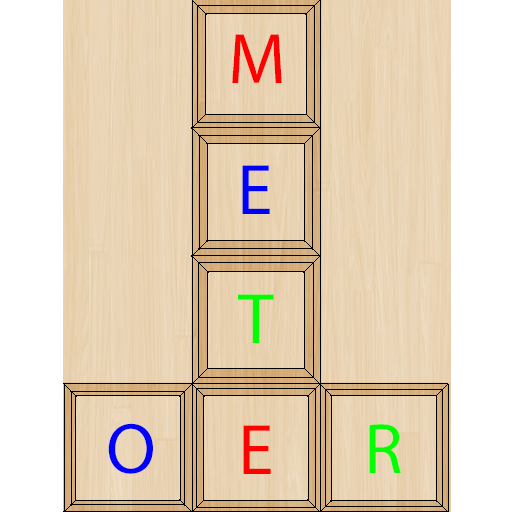
<style>
.page{position:relative;width:512px;height:512px;background:#ffffff}
.page>*{position:absolute;margin:0}
.t1{font:72px "MyriadPro-Regular";color:#ff0000}
.t2{font:72px "MyriadPro-Regular";color:#0000ff}
.t3{font:72px "MyriadPro-Regular";color:#00ff00}
.t4{font:72px "MyriadPro-Regular";color:#ff0101}
</style>
<div class="page">
<p class="t1" style="left:232px;top:34px;width:50px;height:49px">M</p>
<p class="t2" style="left:242px;top:165px;width:28px;height:49px">E</p>
<p class="t3" style="left:238px;top:294px;width:36px;height:49px">T</p>
<p class="t2" style="left:108px;top:423px;width:45px;height:51px">O</p>
<p class="t4" style="left:243px;top:425px;width:28px;height:49px">E</p>
<p class="t3" style="left:369px;top:424px;width:32px;height:49px">R</p>
</div>
